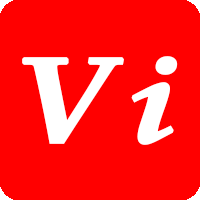
<style>
.page{position:relative;width:200px;height:200px;background:#ff0000}
.page>*{position:absolute;margin:0}
.t1{font:120px "BookAntiqua-BoldItalic";letter-spacing:0.1em;color:#ffffff;font-weight:bold;scale:1.2 1}
</style>
<div class="page">
<p class="t1" style="left:22px;top:56px;width:156px;height:89px">Vi</p>
</div>
